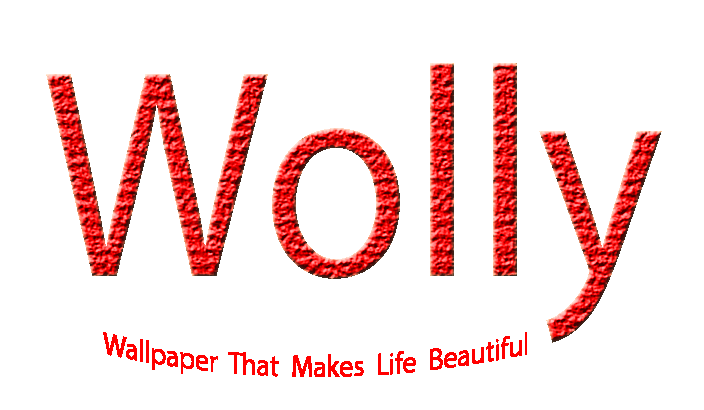
<style>
.page{position:relative;width:704px;height:410px;background:#ffffff}
.page>*{position:absolute;margin:0}
.t1{font:300px "MyriadPro-Regular";scale:0.9 1}
.t2{font:31px "MyriadPro-Regular";color:#ff0000;scale:0.9 1}
</style>
<div class="page">
<p class="t1" style="left:46px;top:63px;width:616px;height:280px">Wolly</p>
<p class="t2" style="left:103px;top:332px;width:424px;height:45px">Wallpaper  That  Makes  Life  Beautiful</p>
</div>
